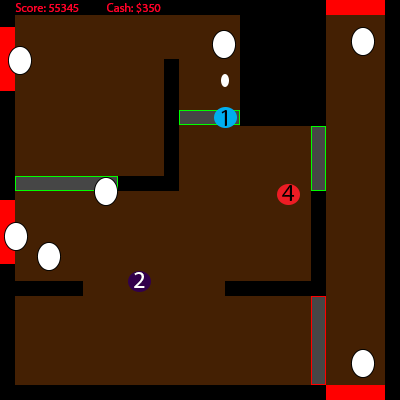
<style>
.page{position:relative;width:400px;height:400px;background:#442003}
.page>*{position:absolute;margin:0}
.t1{font:12px "MyriadPro-Regular";color:#ff002a}
.t2{font:24px "MyriadPro-Regular";color:#000000}
.t3{font:24px "MyriadPro-Regular";color:#ffffff}
</style>
<div class="page">
<p class="t1" style="left:15px;top:2px;width:146px;height:12px">Score: 55345           Cash: $350</p>
<p class="t2" style="left:221px;top:110px;width:6px;height:16px">1</p>
<p class="t2" style="left:282px;top:185px;width:13px;height:16px">4</p>
<p class="t3" style="left:134px;top:272px;width:11px;height:16px">2</p>
</div>
